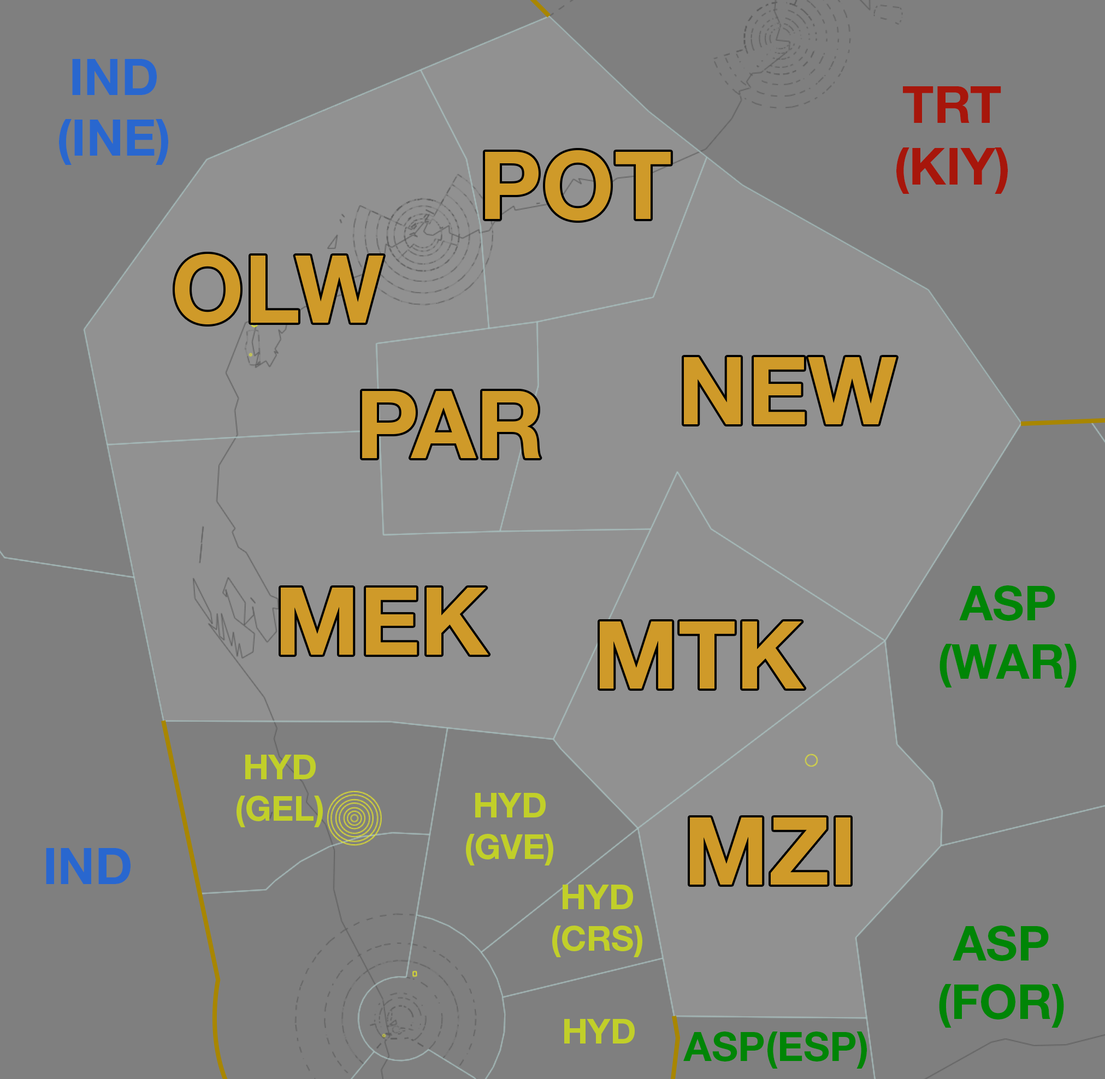
<style>
.page{position:relative;width:1105px;height:1079px;background:#7f7f7f}
.page>*{position:absolute;margin:0}
.t1{font:50.5px "HelveticaNeueLTStd-Bd";color:#2967cf}
.t2{font:51.4px "HelveticaNeueLTStd-Bd";color:#a7160b}
.t3{font:94px "HelveticaNeueLTStd-Bd";color:#cf9a29}
.t4{font:48.3px "HelveticaNeueLTStd-Bd";color:#008506}
.t5{font:34.6px "HelveticaNeueLTStd-Bd";color:#c1cf29}
.t6{font:40.6px "HelveticaNeueLTStd-Bd";color:#008506}
</style>
<div class="page">
<p class="t1" style="left:59px;top:59px;width:109px;height:106px;text-align:center">IND<br>(INE)</p>
<p class="t2" style="left:896px;top:86px;width:112px;height:108px;text-align:center">TRT<br>(KIY)</p>
<p class="t3" style="left:485px;top:150px;width:186px;height:71px">POT</p>
<p class="t3" style="left:175px;top:254px;width:208px;height:70px">OLW</p>
<p class="t3" style="left:684px;top:357px;width:212px;height:67px">NEW</p>
<p class="t3" style="left:362px;top:391px;width:178px;height:67px">PAR</p>
<p class="t3" style="left:281px;top:588px;width:208px;height:67px">MEK</p>
<p class="t4" style="left:939px;top:585px;width:137px;height:103px;text-align:center">ASP<br>(WAR)</p>
<p class="t3" style="left:600px;top:622px;width:205px;height:67px">MTK</p>
<p class="t5" style="left:236px;top:755px;width:87px;height:72px;text-align:center">HYD<br>(GEL)</p>
<p class="t5" style="left:466px;top:793px;width:87px;height:73px;text-align:center">HYD<br>(GVE)</p>
<p class="t3" style="left:690px;top:818px;width:160px;height:67px">MZI</p>
<p class="t1" style="left:46px;top:848px;width:85px;height:36px">IND</p>
<p class="t5" style="left:552px;top:885px;width:90px;height:72px;text-align:center">HYD<br>(CRS)</p>
<p class="t4" style="left:939px;top:926px;width:125px;height:102px;text-align:center">ASP<br>(FOR)</p>
<p class="t5" style="left:564px;top:1019px;width:71px;height:25px">HYD</p>
<p class="t6" style="left:683px;top:1032px;width:184px;height:37px">ASP(ESP)</p>
</div>
